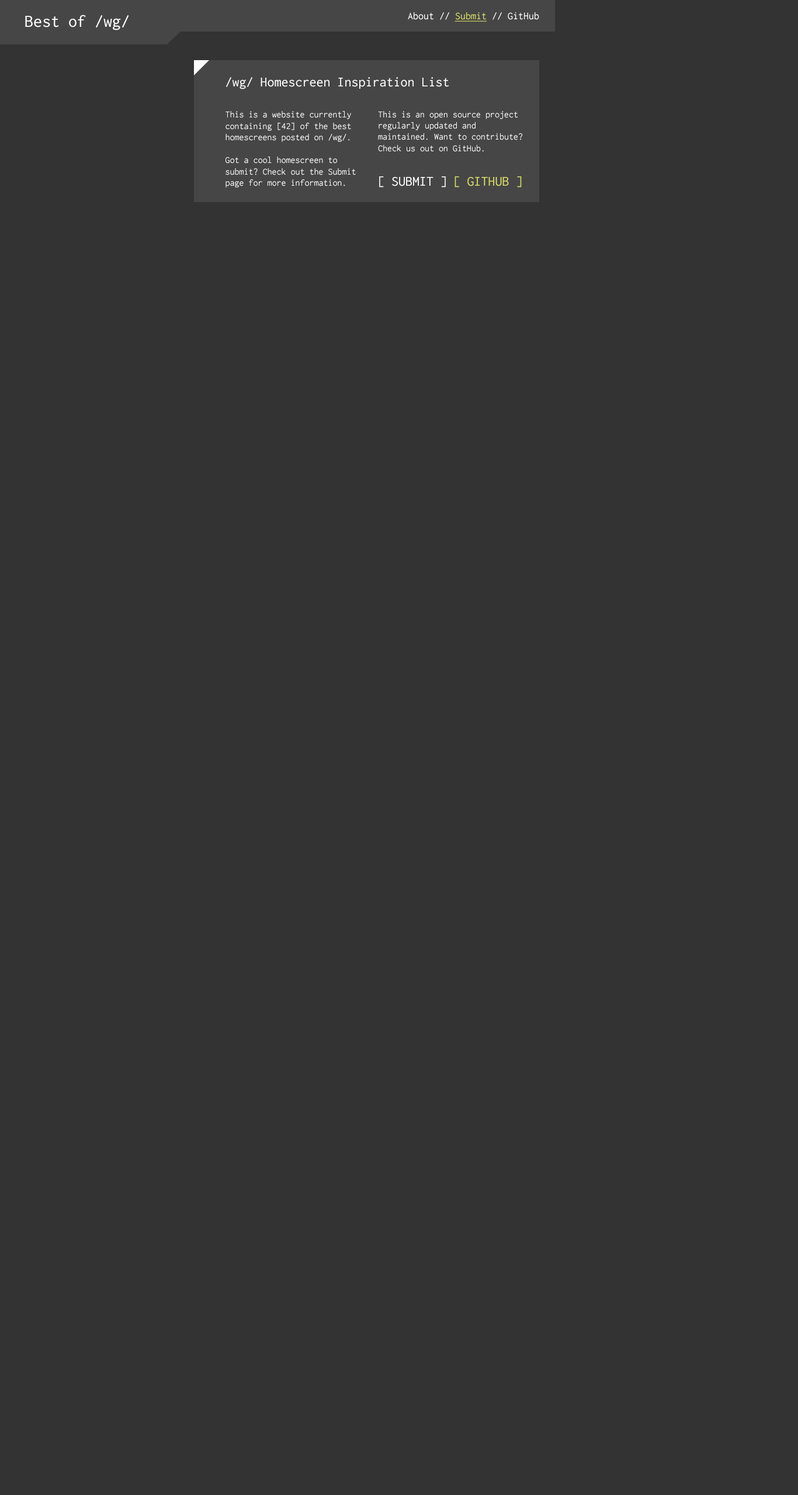
<style>
.page{position:relative;width:798px;height:1495px;background:#333333}
.page>*{position:absolute;margin:0}
.t1{font:17.5px "Inconsolata-Regular";color:#ffffff}
.t2{font:10.5px "Inconsolata-Regular";color:#ffffff}
.t3{font:10.5px "Inconsolata-Regular";color:#d8dc6a;text-decoration:underline}
.t4{font:14px "Inconsolata-Regular";color:#ffffff}
.t5{font:9.3px "Inconsolata-Regular";color:#ffffff}
.t6{font:14px "Inconsolata-Regular";color:#d8dc6a}
</style>
<div class="page">
<p class="t1" style="left:25px;top:15px;width:104px;height:15px">Best of /wg/</p>
<p class="t2" style="left:408px;top:12px;width:131px;height:10px">About // <span class="t3">Submit</span> // GitHub</p>
<p class="t4" style="left:226px;top:77px;width:223px;height:12px">/wg/ Homescreen Inspiration List</p>
<p class="t5" style="left:225px;top:111px;width:126px;height:31px">This is a website currently containing [42] of the best homescreens posted on /wg/.</p>
<p class="t5" style="left:378px;top:111px;width:144px;height:41px">This is an open source project regularly updated and maintained. Want to contribute? Check us out on GitHub.</p>
<p class="t5" style="left:225px;top:156px;width:131px;height:31px">Got a cool homescreen to submit? Check out the Submit page for more information.</p>
<p class="t4" style="left:379px;top:176px;width:67px;height:11px">[ SUBMIT ]</p>
<p class="t6" style="left:454px;top:176px;width:67px;height:11px">[ GITHUB ]</p>
</div>
